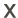
<style>
.page{position:relative;width:18px;height:18px;background:#ffffff}
.page>*{position:absolute;margin:0}
.t1{font:23.4px "GothicMB101Pro-Regular";letter-spacing:-0.04em;color:#4b4742;font-weight:bold;scale:0.85 1}
</style>
<div class="page">
<p class="t1" style="left:3px;top:4px;width:13px;height:14px">x</p>
</div>
